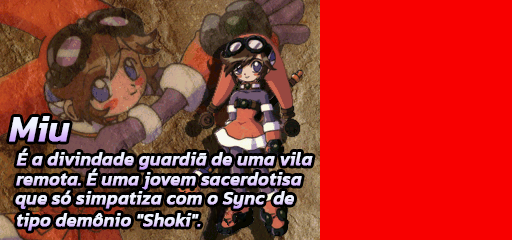
<style>
.page{position:relative;width:512px;height:240px;background:#f80000}
.page>*{position:absolute;margin:0}
.t1{font:36px "Kanit-MediumItalic";font-weight:bold}
.t2{font:18px "Kanit-MediumItalic";font-weight:bold}
</style>
<div class="page">
<p class="t1" style="left:9px;top:116px;width:61px;height:26px">Miu</p>
<p class="t2" style="left:16px;top:148px;width:297px;height:22px">É a divindade guardiã de uma vila</p>
<p class="t2" style="left:16px;top:168px;width:286px;height:22px">remota. É uma jovem sacerdotisa</p>
<p class="t2" style="left:15px;top:190px;width:279px;height:19px">que só simpatiza com o Sync  de</p>
<p class="t2" style="left:17px;top:213px;width:184px;height:18px">tipo demônio "Shoki".</p>
</div>
